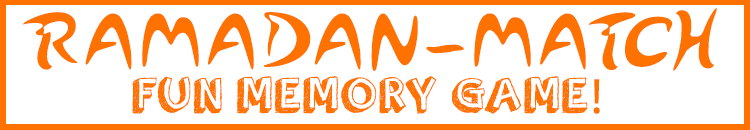
<style>
.page{position:relative;width:750px;height:130px;background:#ffffff}
.page>*{position:absolute;margin:0}
.t1{font:68px "Arabolical1";letter-spacing:0.08em;color:#ff7200;text-transform:uppercase}
.t2{font:50px "orangejuice";letter-spacing:0.08em;color:#ff7200;text-transform:uppercase}
.t3{font:50px "MyriadPro-Regular";letter-spacing:0.08em;color:#ff7200;text-transform:uppercase}
</style>
<div class="page">
<p class="t1" style="left:23px;top:8px;width:694px;height:63px">Ramadan-Match</p>
<p class="t2" style="left:132px;top:76px;width:468px;height:38px">Fun Memory Game<span class="t3">!</span></p>
</div>
